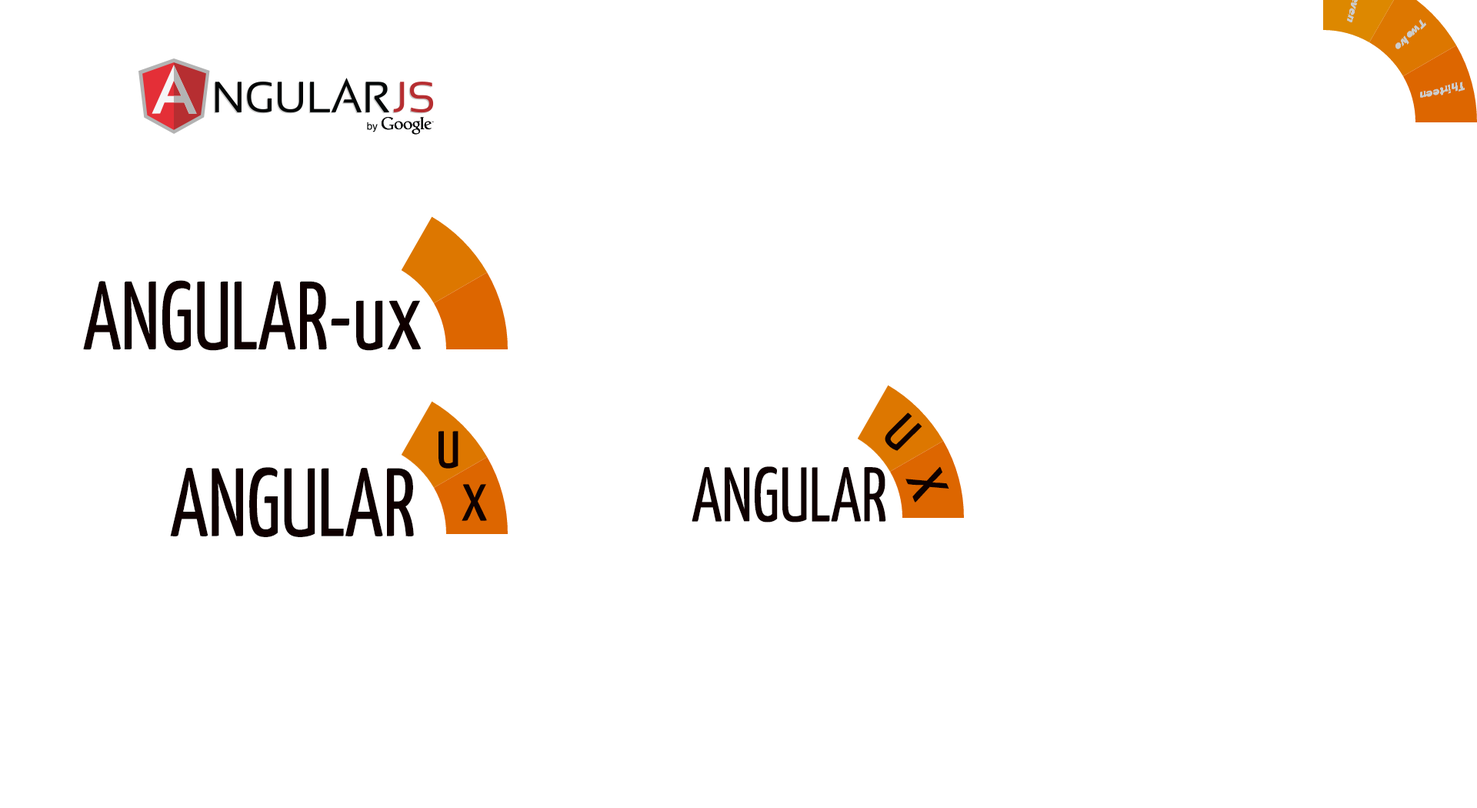
<style>
.page{position:relative;width:1477px;height:808px;background:#ffffff}
.page>*{position:absolute;margin:0}
.t1{font:96.7px "YanoneKaffeesatz-Regular";color:#0f0000;scale:0.9 1}
.t2{font:73px "YanoneKaffeesatz-Regular";color:#0f0000;scale:0.9 1}
.t3{font:96.6px "YanoneKaffeesatz-Regular";color:#0f0000;scale:0.9 1}
.t4{font:77.3px "YanoneKaffeesatz-Regular";color:#0f0000;scale:0.9 1}
</style>
<div class="page">
<p class="t1" style="left:83px;top:280px;width:338px;height:71px">ANGULAR-ux</p>
<p class="t2" style="left:884px;top:412px;width:38px;height:39px;rotate:45deg">u</p>
<p class="t2" style="left:438px;top:431px;width:20px;height:37px">u</p>
<p class="t3" style="left:170px;top:467px;width:244px;height:70px">ANGULAR</p>
<p class="t4" style="left:691px;top:466px;width:195px;height:56px">ANGULAR</p>
<p class="t2" style="left:905px;top:466px;width:44px;height:36px;rotate:69deg">x</p>
<p class="t2" style="left:461px;top:484px;width:26px;height:37px">x</p>
</div>
